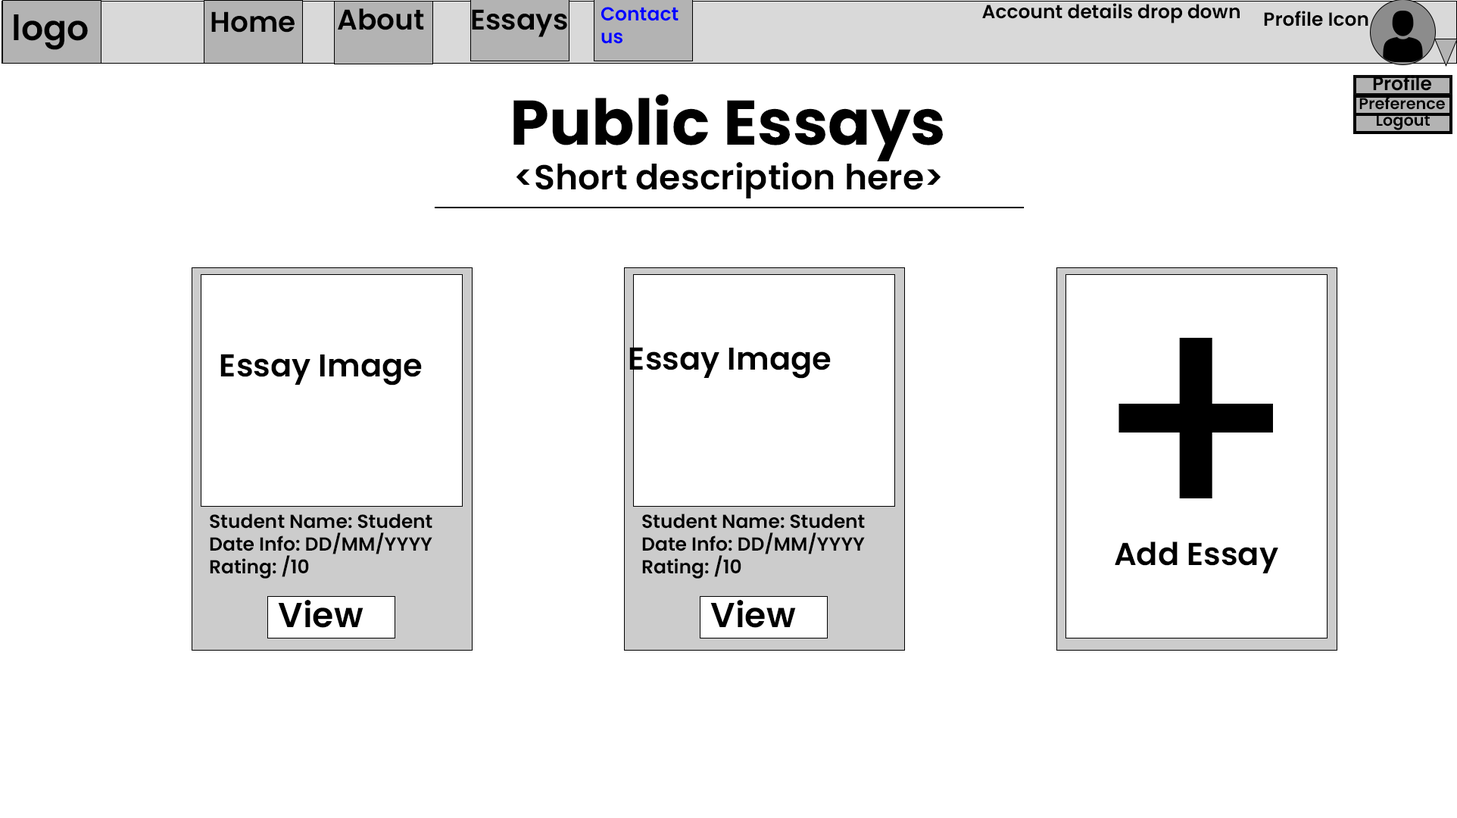
<style>
.page{position:relative;width:1457px;height:818px;background:#ffffff}
.page>*{position:absolute;margin:0}
.t1{font:18.9px "Poppins-SemiBold";color:#000000}
.t2{font:34.7px "Poppins-SemiBold";color:#000000}
.t3{font:28.4px "Poppins-SemiBold";color:#000000}
.t4{font:18.9px "Poppins-SemiBold";color:#0000ff}
.t5{font:63.1px "Poppins-Bold";color:#000000}
.t6{font:15.8px "Poppins-SemiBold";color:#000000}
.t7{font:315.6px "CascadiaCode-Regular";color:#000000}
.t8{font:31.6px "Poppins-SemiBold";color:#000000}
</style>
<div class="page">
<p class="t1" style="left:983px;top:3px;width:257px;height:20px">Account details drop down</p>
<p class="t2" style="left:14px;top:14px;width:74px;height:36px">logo</p>
<p class="t3" style="left:211px;top:11px;width:84px;height:22px">Home</p>
<p class="t3" style="left:338px;top:8px;width:86px;height:22px">About</p>
<p class="t3" style="left:472px;top:9px;width:95px;height:28px">Essays</p>
<p class="t4" style="left:601px;top:7px;width:78px;height:37px">Contact us</p>
<p class="t1" style="left:1264px;top:11px;width:105px;height:16px">Profile Icon</p>
<p class="t1" style="left:1373px;top:75px;width:59px;height:16px">Profile</p>
<p class="t5" style="left:514px;top:94px;width:429px;height:67px">Public Essays</p>
<p class="t6" style="left:1360px;top:96px;width:85px;height:14px">Preference</p>
<p class="t6" style="left:1377px;top:114px;width:53px;height:16px">Logout</p>
<p class="t2" style="left:516px;top:162px;width:426px;height:36px">&lt;Short description here&gt;</p>
<p class="t7" style="left:1119px;top:338px;width:154px;height:160px">+</p>
<p class="t8" style="left:220px;top:354px;width:202px;height:32px">Essay Image</p>
<p class="t8" style="left:630px;top:347px;width:201px;height:32px">Essay Image</p>
<p class="t1" style="left:210px;top:514px;width:223px;height:65px">Student Name: Student <br>Date Info: DD/MM/YYYY<br>Rating: /10</p>
<p class="t1" style="left:642px;top:514px;width:223px;height:65px">Student Name: Student <br>Date Info: DD/MM/YYYY<br>Rating: /10</p>
<p class="t8" style="left:1115px;top:542px;width:164px;height:31px">Add Essay</p>
<p class="t2" style="left:278px;top:600px;width:86px;height:28px">View</p>
<p class="t2" style="left:711px;top:600px;width:85px;height:28px">View</p>
</div>
